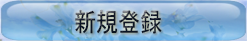
<style>
.page{position:relative;width:247px;height:41px}
.page>*{position:absolute;margin:0}
.t1{font:26.1px "MS-Gothic";scale:0.84 1}
</style>
<div class="page">
<p class="t1" style="left:75px;top:9px;width:87px;height:25px">新規登録</p>
</div>
